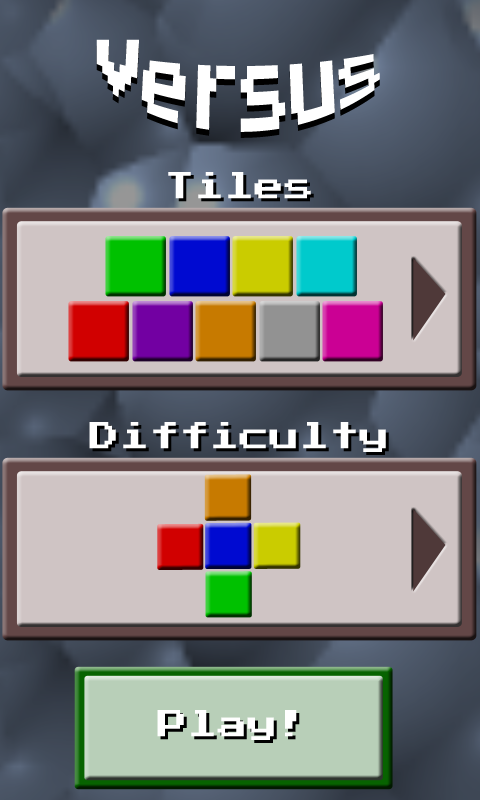
<style>
.page{position:relative;width:480px;height:800px;background:#cfc4c4}
.page>*{position:absolute;margin:0}
.t1{font:48px "PressStart2P";color:#ffffff}
.t2{font:48px "PressStart2P"}
.t3{font:30px "PressStart2P";color:#ffffff}
.t4{font:30px "PressStart2P"}
</style>
<div class="page">
<p class="t1" style="left:96px;top:39px;width:284px;height:93px;text-align:center">Versus</p>
<p class="t2" style="left:96px;top:45px;width:284px;height:93px;text-align:center">Versus</p>
<p class="t3" style="left:168px;top:172px;width:143px;height:27px">Tiles</p>
<p class="t3" style="left:89px;top:422px;width:297px;height:30px">Difficulty</p>
<p class="t3" style="left:157px;top:710px;width:140px;height:30px">Play!</p>
<p class="t4" style="left:160px;top:713px;width:140px;height:30px">Play!</p>
</div>
